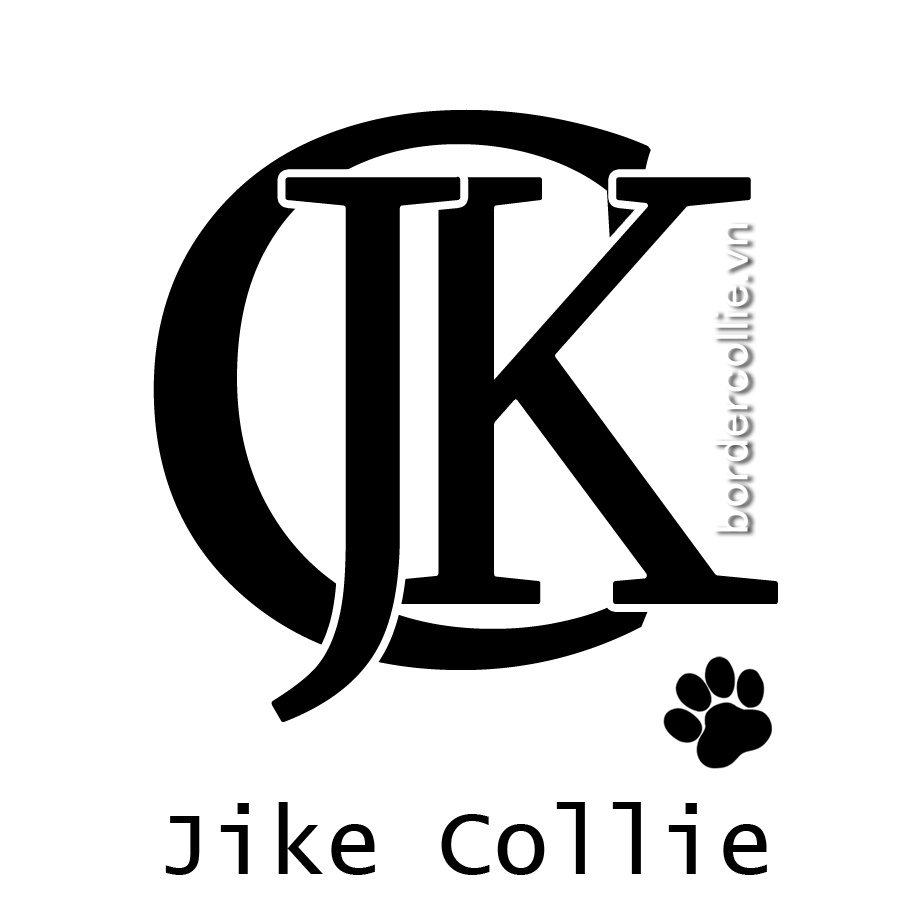
<style>
.page{position:relative;width:915px;height:906px;background:#ffffff}
.page>*{position:absolute;margin:0}
.t1{font:775.8px "PalatinoLinotype-Roman";color:#000000}
.t2{font:634px "Sylfaen";color:#000000}
.t3{font:93.1px "LucidaConsole";color:#000000}
</style>
<div class="page">
<p class="t1" style="left:153px;top:109px;width:503px;height:561px">C</p>
<p class="t2" style="left:271px;top:176px;width:190px;height:546px">J</p>
<p class="t2" style="left:381px;top:177px;width:397px;height:427px">K</p>
<p class="t3" style="left:165px;top:802px;width:602px;height:73px">Jike Collie</p>
</div>
